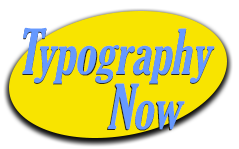
<style>
.page{position:relative;width:239px;height:149px;background:#f8e400}
.page>*{position:absolute;margin:0}
.t1{font:60px "GloucesterMT-ExtraCondensed";color:#6699ff;font-style:italic}
</style>
<div class="page">
<p class="t1" style="left:22px;top:28px;width:193px;height:57px">Typography</p>
<p class="t1" style="left:22px;top:27px;width:193px;height:57px">Typography</p>
<p class="t1" style="left:107px;top:84px;width:77px;height:47px">Now</p>
<p class="t1" style="left:108px;top:83px;width:77px;height:47px">Now</p>
</div>
